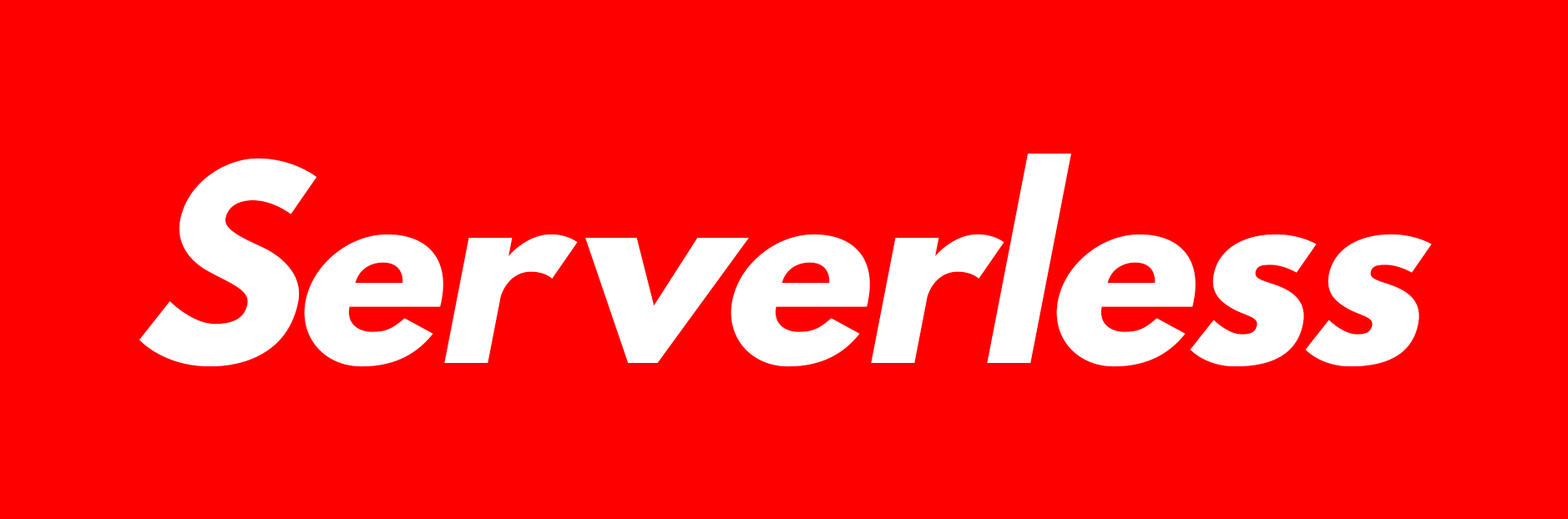
<style>
.page{position:relative;width:1568px;height:519px;background:#ff0000}
.page>*{position:absolute;margin:0}
.t1{font:243.5px "LeagueSpartan-Bold";letter-spacing:-0.02em;color:#ffffff;font-style:italic}
.t2{font:243.5px "LeagueSpartan-Bold";letter-spacing:0.06em;color:#ffffff;font-style:italic}
</style>
<div class="page">
<p class="t1" style="left:139px;top:154px;width:1293px;height:213px">Se<span class="t2">r</span>verless</p>
</div>
